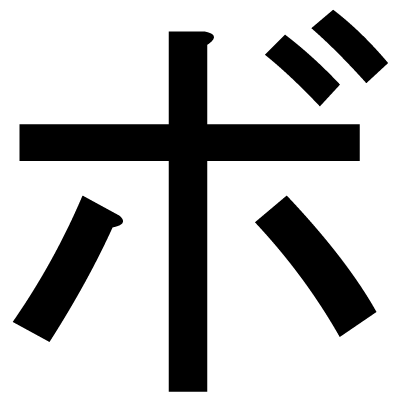
<style>
.page{position:relative;width:400px;height:400px;background:#ffffff}
.page>*{position:absolute;margin:0}
.t1{font:424.8px "MS-PGothic";color:#000000}
</style>
<div class="page">
<p class="t1" style="left:12px;top:9px;width:376px;height:383px">ボ</p>
</div>
